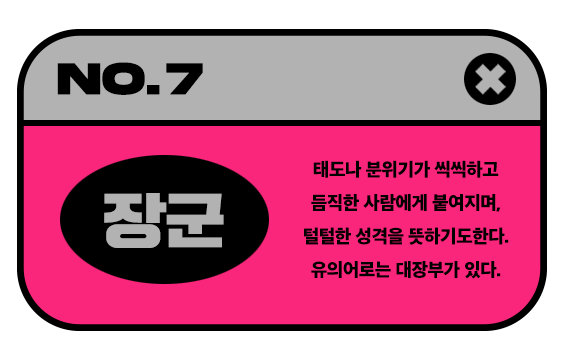
<style>
.page{position:relative;width:565px;height:362px;background:#fa267c}
.page>*{position:absolute;margin:0}
.t1{font:46.8px "AkiraExpanded-SuperBold";letter-spacing:0.025em;color:#000000;font-weight:bold}
.t2{font:46.8px "AkiraExpanded-SuperBold";letter-spacing:0.05em;color:#000000;font-weight:bold}
.t3{font:19.1px "AppleSDGothicNeoH00";letter-spacing:-0.025em;color:#000000}
.t4{font:57.7px "DXmetalgothic-Heavy-KSCpc-EUC-H";letter-spacing:-0.025em;color:#b2b2b2;scale:1.11 1}
</style>
<div class="page">
<p class="t1" style="left:57px;top:62px;width:146px;height:33px">NO. <span class="t2">7</span></p>
<p class="t3" style="left:304px;top:160px;width:205px;height:119px;text-align:center">태도나 분위기가 씩씩하고<br>듬직한 사람에게 붙여지며,<br>털털한 성격을 뜻하기도한다.<br>유의어로는 대장부가 있다.</p>
<p class="t4" style="left:104px;top:193px;width:120px;height:55px">장군</p>
</div>
